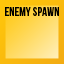
<style>
.page{position:relative;width:64px;height:64px}
.page>*{position:absolute;margin:0}
.t1{font:12.5px "BebasNeue";color:#000000}
</style>
<div class="page">
<p class="t1" style="left:5px;top:7px;width:54px;height:9px">ENEMY SPAWN</p>
</div>
